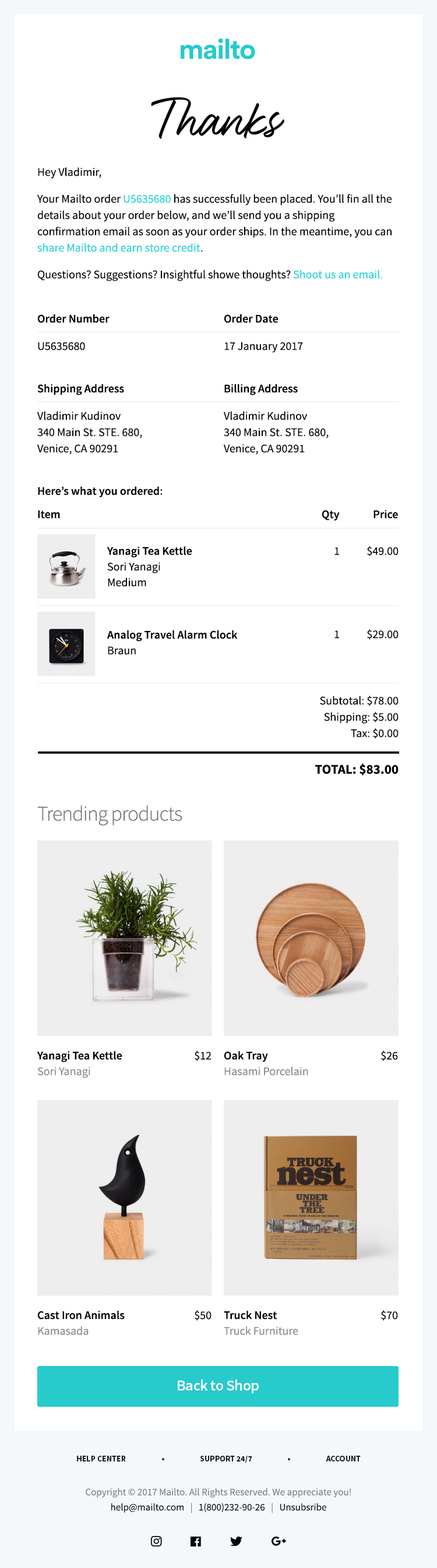
<style>
.page{position:relative;width:437px;height:1568px;background:#ffffff}
.page>*{position:absolute;margin:0}
.t1{font:11.6px/16.3px "SourceSansPro-Regular";color:#000000}
.t2{font:11.6px/16.3px "SourceSansPro-Regular";color:#24d3d6}
.t3{font:11.6px "SourceSansPro-Semibold";color:#000000}
.t4{font:11.6px "SourceSansPro-Regular";color:#000000}
.t5{font:11.6px/15.7px "SourceSansPro-Regular";color:#000000}
.t6{font:11.6px/15.7px "SourceSansPro-Semibold";color:#000000}
.t7{font:13.4px "SourceSansPro-Bold";color:#000000;text-transform:uppercase}
.t8{font:21px "SourceSansPro-Light";letter-spacing:-0.03em;color:#737373}
.t9{font:11.6px/15.7px "SourceSansPro-Regular";color:#8c8c8c}
.t10{font:15.1px "SourceSansPro-Semibold";letter-spacing:-0.015em;color:#ffffff}
.t11{font:8.1px "SourceSansPro-Bold";color:#1a1a1a}
.t12{font:9.9px/15.1px "SourceSansPro-Regular";color:#868686}
.t13{font:9.9px/15.1px "SourceSansPro-Regular";color:#1a1a1a}
</style>
<div class="page">
<p class="t1" style="left:37px;top:167px;width:355px;height:114px">Hey Vladimir,<br>Your Mailto order <span class="t2">U5635680 </span>has successfully been placed. You’ll fin all the details about your order below, and we’ll send you a shipping confirmation email as soon as your order ships. In the meantime, you can <span class="t2">share Mailto and earn store credit</span>.<br>Questions? Suggestions? Insightful showe thoughts?<span class="t2"> Shoot us an email.</span></p>
<p class="t3" style="left:37px;top:314px;width:72px;height:9px">Order Number</p>
<p class="t3" style="left:224px;top:314px;width:54px;height:9px">Order Date</p>
<p class="t4" style="left:38px;top:342px;width:47px;height:8px">U5635680</p>
<p class="t4" style="left:224px;top:342px;width:79px;height:11px">17 January 2017</p>
<p class="t3" style="left:37px;top:384px;width:87px;height:11px">Shipping Address</p>
<p class="t3" style="left:224px;top:384px;width:73px;height:11px">Billing Address</p>
<p class="t1" style="left:37px;top:411px;width:105px;height:44px">Vladimir Kudinov<br>340 Main St. STE. 680, Venice, CA 90291</p>
<p class="t1" style="left:223px;top:411px;width:105px;height:44px">Vladimir Kudinov<br>340 Main St. STE. 680, Venice, CA 90291</p>
<p class="t3" style="left:38px;top:487px;width:124px;height:11px">Here’s what you ordered:</p>
<p class="t3" style="left:321px;top:510px;width:18px;height:11px">Qty</p>
<p class="t3" style="left:373px;top:510px;width:25px;height:9px">Price</p>
<p class="t3" style="left:38px;top:510px;width:22px;height:9px">Item</p>
<p class="t4" style="left:367px;top:546px;width:31px;height:10px">$49.00</p>
<p class="t5" style="left:107px;top:547px;width:85px;height:40px"><span class="t6">Yanagi Tea Kettle<br></span>Sori Yanagi<br>Medium</p>
<p class="t4" style="left:334px;top:547px;width:5px;height:8px">1</p>
<p class="t4" style="left:367px;top:629px;width:31px;height:11px">$29.00</p>
<p class="t6" style="left:107px;top:630px;width:130px;height:25px">Analog Travel Alarm Clock<br><span class="t5">Braun</span></p>
<p class="t4" style="left:334px;top:630px;width:5px;height:8px">1</p>
<p class="t1" style="left:320px;top:696px;width:78px;height:43px;text-align:right">Subtotal: $78.00<br>Shipping: $5.00<br>Tax: $0.00</p>
<p class="t7" style="left:315px;top:764px;width:83px;height:11px">TOTAL: $83.00</p>
<p class="t8" style="left:37px;top:805px;width:145px;height:21px">Trending products</p>
<p class="t6" style="left:37px;top:1051px;width:85px;height:27px">Yanagi Tea Kettle<br><span class="t9">Sori Yanagi</span></p>
<p class="t4" style="left:194px;top:1051px;width:17px;height:10px">$12</p>
<p class="t9" style="left:224px;top:1051px;width:84px;height:25px"><span class="t6">Oak Tray<br></span>Hasami Porcelain</p>
<p class="t4" style="left:381px;top:1051px;width:17px;height:10px">$26</p>
<p class="t6" style="left:37px;top:1311px;width:88px;height:24px">Cast Iron Animals<br><span class="t9">Kamasada</span></p>
<p class="t4" style="left:194px;top:1310px;width:17px;height:11px">$50</p>
<p class="t9" style="left:224px;top:1311px;width:74px;height:24px"><span class="t6">Truck Nest<br></span>Truck Furniture</p>
<p class="t4" style="left:381px;top:1310px;width:17px;height:11px">$70</p>
<p class="t10" style="left:178px;top:1379px;width:80px;height:14px">Back to Shop</p>
<p class="t11" style="left:77px;top:1456px;width:283px;height:7px">HELP CENTER                     •                     SUPPORT 24/7                     •                     ACCOUNT</p>
<p class="t12" style="left:86px;top:1488px;width:265px;height:25px;text-align:center">Copyright © 2017 Mailto. All Rights Reserved. We appreciate you!<br><span class="t13">help@mailto.com </span>  |   <span class="t13">1(800)232-90-26 </span>  |   <span class="t13">Unsubsribe</span></p>
</div>
